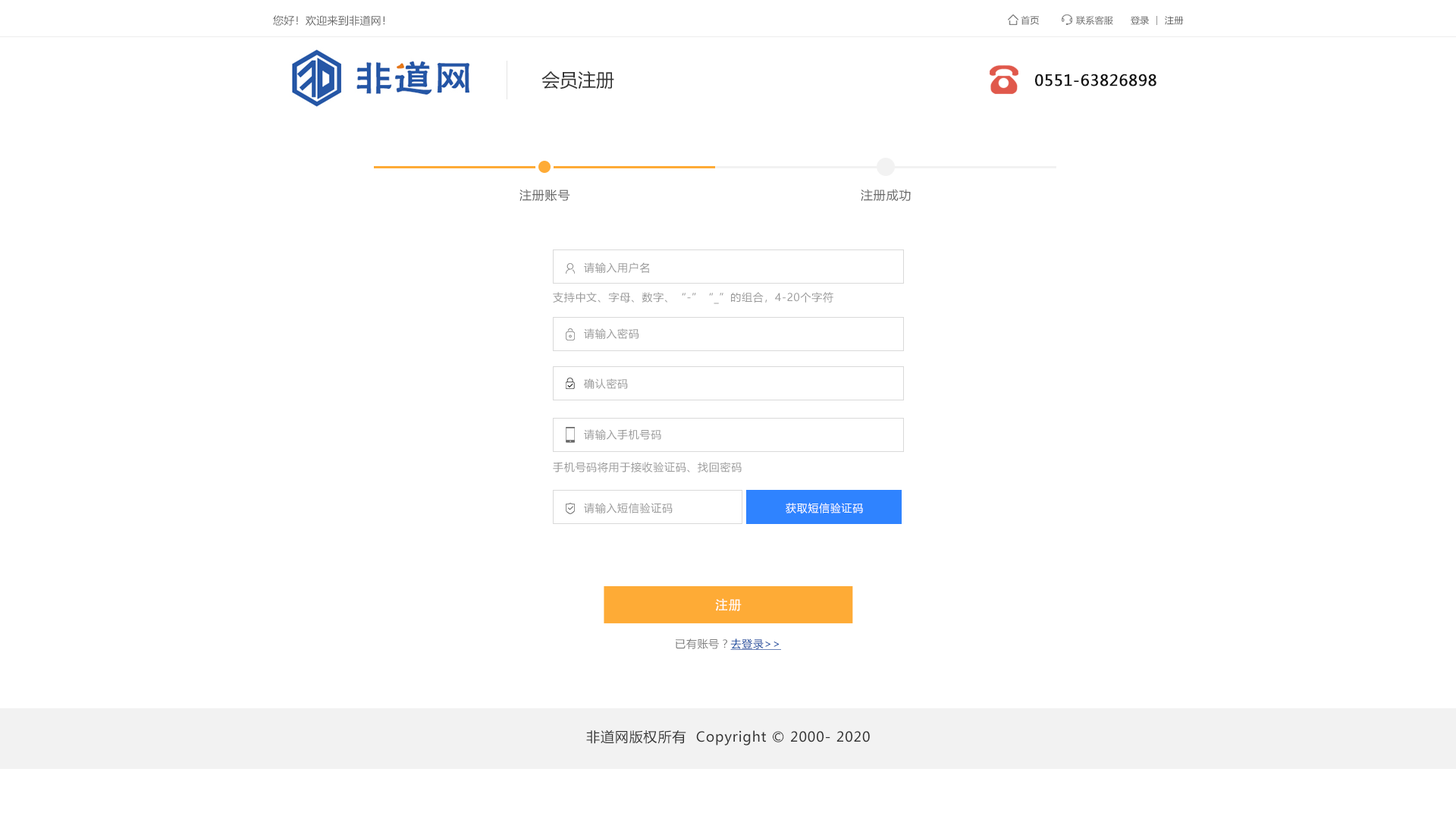
<style>
.page{position:relative;width:1456px;height:819px;background:#ffffff}
.page>*{position:absolute;margin:0}
.t1{font:10.6px "MicrosoftYaHei";letter-spacing:0.022em;color:#666666}
.t2{font:9.1px "MicrosoftYaHei";letter-spacing:0.022em;color:#666666}
.t3{font:18.2px "MicrosoftYaHei";color:#333333}
.t4{font:15.2px "MicrosoftYaHei";letter-spacing:0.022em;color:#121212;font-weight:bold}
.t5{font:12.1px "MicrosoftYaHei";letter-spacing:0.05em;color:#666666}
.t6{font:10.6px "MicrosoftYaHei";letter-spacing:0.05em;color:#999999}
.t7{font:10.6px "MicrosoftYaHei";letter-spacing:0.05em;color:#ffffff}
.t8{font:13.5px "AdobeHeitiStd-Regular";color:#ffffff}
.t9{font:10.6px "MicrosoftYaHei";letter-spacing:0.05em;color:#7f7f7f}
.t10{font:10.6px "MicrosoftYaHei";letter-spacing:0.05em;color:#13489e;text-decoration:underline}
.t11{font:13.6px "MicrosoftYaHei";letter-spacing:0.05em;color:#333333}
</style>
<div class="page">
<p class="t1" style="left:273px;top:15px;width:112px;height:11px">您好！欢迎来到非道网！</p>
<p class="t2" style="left:1021px;top:16px;width:18px;height:9px">首页</p>
<p class="t2" style="left:1076px;top:16px;width:37px;height:9px">联系客服</p>
<p class="t2" style="left:1131px;top:16px;width:18px;height:9px">登录</p>
<p class="t2" style="left:1165px;top:16px;width:19px;height:9px">注册</p>
<p class="t3" style="left:541px;top:71px;width:73px;height:18px">会员注册</p>
<p class="t4" style="left:1035px;top:74px;width:121px;height:12px">0551-63826898</p>
<p class="t5" style="left:519px;top:189px;width:51px;height:13px">注册账号</p>
<p class="t5" style="left:861px;top:189px;width:50px;height:12px">注册成功</p>
<p class="t6" style="left:584px;top:262px;width:65px;height:11px">请输入用户名</p>
<p class="t6" style="left:553px;top:292px;width:280px;height:12px">支持中文、字母、数字、“-”“_”的组合，4-20个字符</p>
<p class="t6" style="left:584px;top:328px;width:55px;height:11px">请输入密码</p>
<p class="t6" style="left:584px;top:378px;width:44px;height:11px">确认密码</p>
<p class="t6" style="left:584px;top:429px;width:77px;height:11px">请输入手机号码</p>
<p class="t6" style="left:553px;top:462px;width:189px;height:10px">手机号码将用于接收验证码、找回密码</p>
<p class="t6" style="left:584px;top:503px;width:89px;height:10px">请输入短信验证码</p>
<p class="t7" style="left:786px;top:503px;width:77px;height:10px">获取短信验证码</p>
<p class="t8" style="left:715px;top:598px;width:27px;height:13px">注册</p>
<p class="t9" style="left:676px;top:639px;width:105px;height:11px">已有账号？<span class="t10">去登录&gt;&gt;</span></p>
<p class="t11" style="left:586px;top:730px;width:284px;height:15px">非道网版权所有  Copyright © 2000- 2020</p>
</div>
